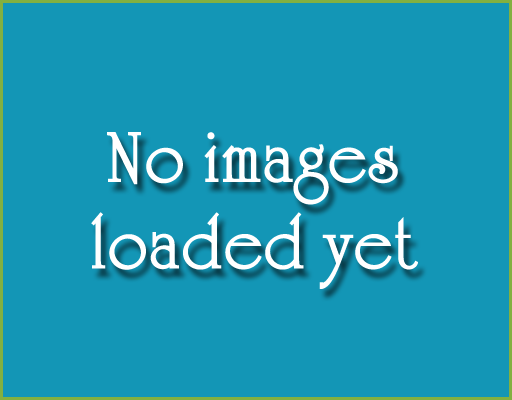
<style>
.page{position:relative;width:512px;height:400px;background:#1396b6}
.page>*{position:absolute;margin:0}
.t1{font:72px "UniversityRomanLetPlain";color:#ffffff;font-weight:bold}
</style>
<div class="page">
<p class="t1" style="left:91px;top:132px;width:327px;height:157px;text-align:center">No images<br>loaded yet</p>
</div>
